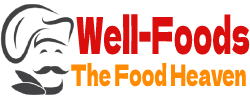
<style>
.page{position:relative;width:250px;height:100px;background:#ffffff}
.page>*{position:absolute;margin:0}
.t1{font:50.8px "DelaGothicOne-Regular";color:#db0e0e;scale:0.51 1}
.t2{font:29.5px "DelaGothicOne-Regular";color:#ff8b00;scale:0.58 1}
</style>
<div class="page">
<p class="t1" style="left:76px;top:14px;width:174px;height:41px">Well-Foods</p>
<p class="t2" style="left:71px;top:63px;width:175px;height:24px">The Food Heaven</p>
</div>
